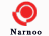
<style>
.page{position:relative;width:49px;height:36px;background:#fcfbfb}
.page>*{position:absolute;margin:0}
.t1{font:8px "BaskOldFace";letter-spacing:0.14em;color:#000015;font-weight:bold}
</style>
<div class="page">
<p class="t1" style="left:10px;top:28px;width:32px;height:7px">Narnoo</p>
</div>
